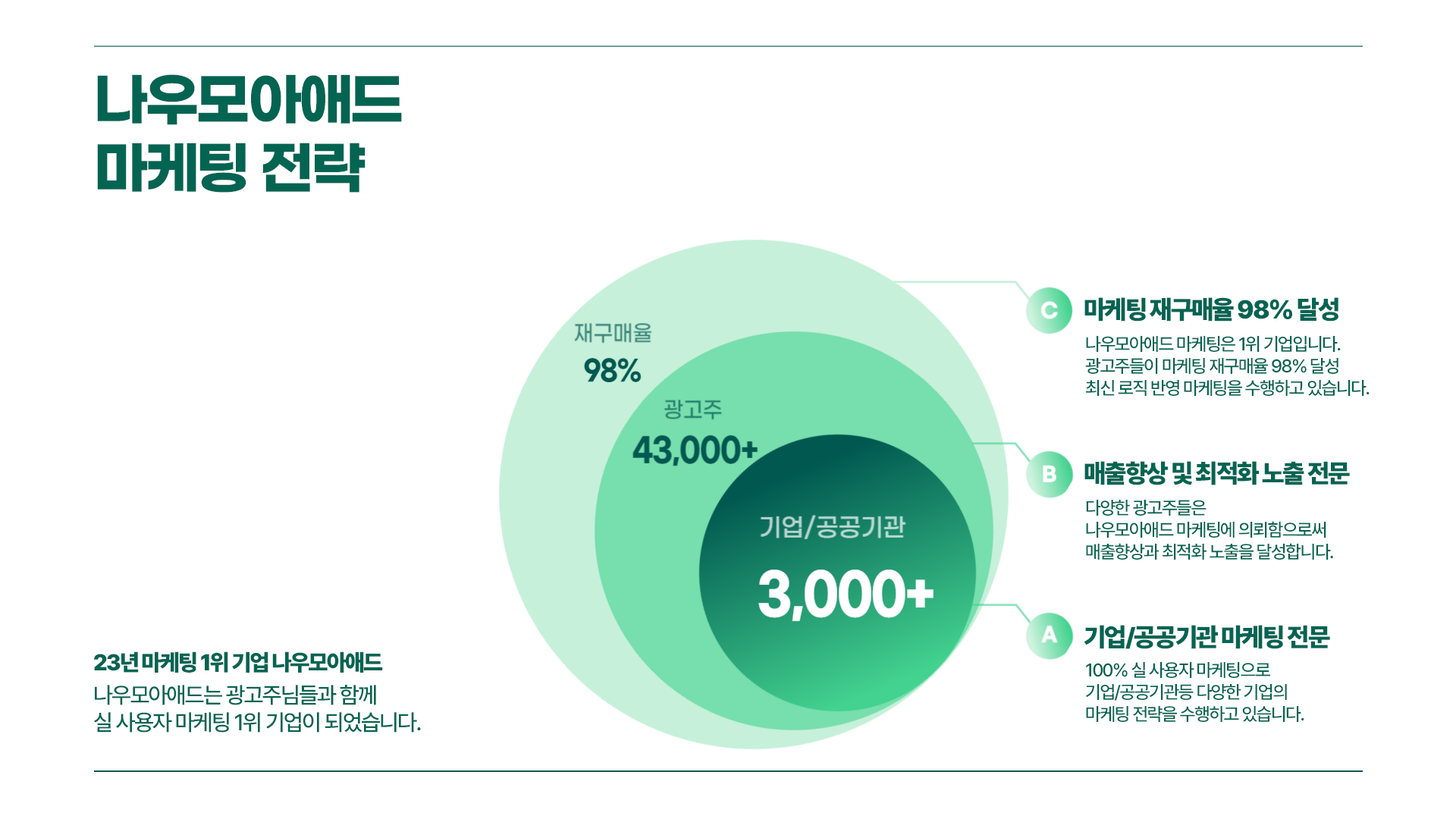
<style>
.page{position:relative;width:1456px;height:819px;background:#ffffff}
.page>*{position:absolute;margin:0}
.t1{font:56.9px "GmarketSansBold";letter-spacing:-0.06em;color:#036452;text-transform:uppercase}
.t2{font:25.8px "Pretendard-Black";letter-spacing:-0.06em;color:#036452;text-transform:uppercase}
.t3{font:18.2px "Pretendard-Medium";letter-spacing:-0.06em;color:#036452;text-transform:uppercase}
.t4{font:22.7px "Pretendard-Black";letter-spacing:-0.06em;color:#036452;text-transform:uppercase}
.t5{font:22.7px "Pretendard-Medium";letter-spacing:-0.06em;color:#036452;text-transform:uppercase}
</style>
<div class="page">
<p class="t1" style="left:97px;top:74px;width:305px;height:119px">나우모아애드<br>마케팅 전략</p>
<p class="t2" style="left:1084px;top:297px;width:254px;height:25px">마케팅 재구매율 98% 달성</p>
<p class="t3" style="left:1085px;top:336px;width:285px;height:60px">나우모아애드 마케팅은 1위 기업입니다.<br>광고주들이 마케팅 재구매율 98% 달성<br>최신 로직 반영 마케팅을 수행하고 있습니다.</p>
<p class="t2" style="left:1084px;top:461px;width:266px;height:24px">매출향상 및 최적화 노출 전문</p>
<p class="t3" style="left:1086px;top:500px;width:247px;height:60px">다양한 광고주들은<br>나우모아애드 마케팅에 의뢰함으로써<br>매출향상과 최적화 노출을 달성합니다.</p>
<p class="t2" style="left:1084px;top:625px;width:246px;height:24px">기업/공공기관 마케팅 전문</p>
<p class="t4" style="left:94px;top:651px;width:289px;height:22px">23년 마케팅 1위 기업 나우모아애드</p>
<p class="t3" style="left:1086px;top:662px;width:218px;height:60px">100% 실 사용자 마케팅으로<br>기업/공공기관등 다양한 기업의 <br>마케팅 전략을 수행하고 있습니다.</p>
<p class="t5" style="left:94px;top:685px;width:327px;height:48px">나우모아애드는 광고주님들과 함께<br>실 사용자 마케팅 1위 기업이 되었습니다.</p>
</div>
